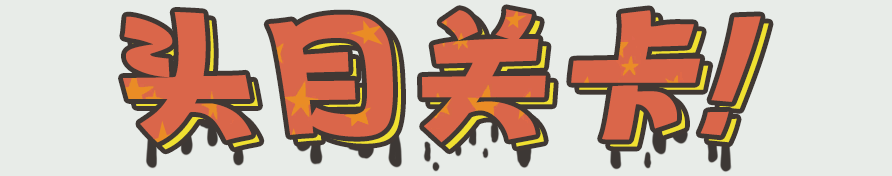
<style>
.page{position:relative;width:892px;height:176px;background:#e8ece8}
.page>*{position:absolute;margin:0}
.t1{font:148px "zihunPOPhaibaoti";color:#da664a}
.t2{font:148px "zihunPOPhaibaoti"}
</style>
<div class="page">
<p class="t1" style="left:123px;top:9px;width:638px;height:134px">头目关卡!</p>
<p class="t2" style="left:131px;top:16px;width:638px;height:134px">头目关卡!</p>
</div>
